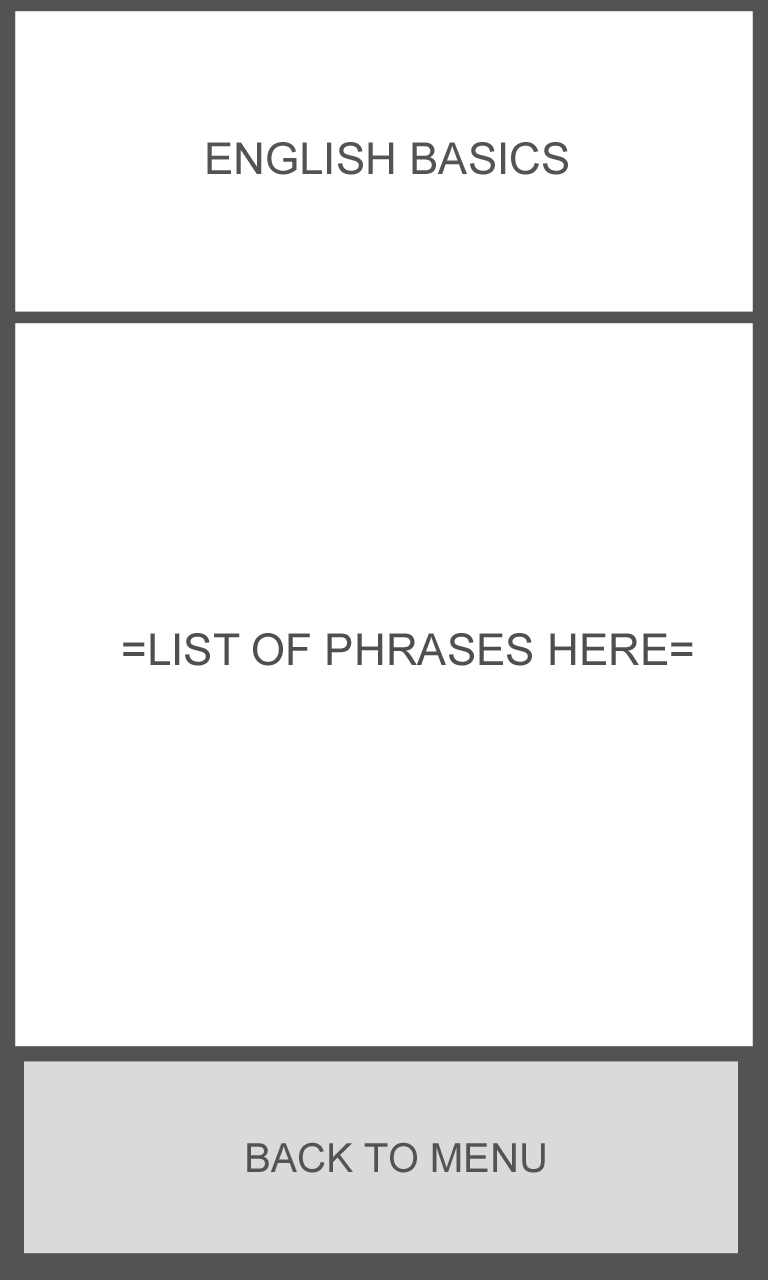
<style>
.page{position:relative;width:768px;height:1280px;background:#ffffff}
.page>*{position:absolute;margin:0}
.t1{font:44px "ArialMT";color:#535353}
.t2{font:44px "ArialMT";color:#4f4f4f}
.t3{font:40px "ArialMT";color:#535353}
</style>
<div class="page">
<p class="t1" style="left:207px;top:142px;width:361px;height:33px">ENGLISH BASICS</p>
<p class="t2" style="left:123px;top:633px;width:570px;height:33px">=LIST OF PHRASES HERE=</p>
<p class="t3" style="left:247px;top:1142px;width:298px;height:31px">BACK TO MENU</p>
</div>
